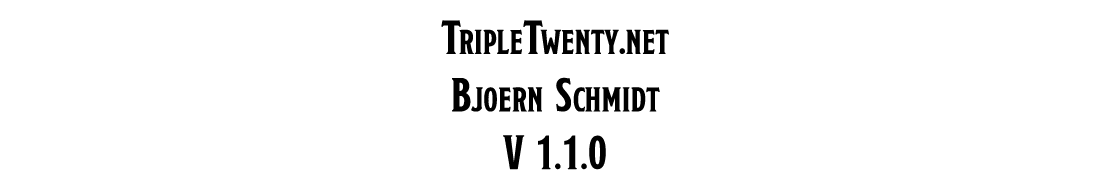
<style>
.page{position:relative;width:1112px;height:180px;background:#ffffff}
.page>*{position:absolute;margin:0}
.t1{font:48px "NodestoCapsCondensed";letter-spacing:-0.01em;color:#000000}
</style>
<div class="page">
<p class="t1" style="left:441px;top:20px;width:228px;height:150px;text-align:center">TripleTwenty.net<br>Bjoern Schmidt<br>V 1.1.0</p>
</div>
